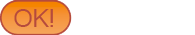
<style>
.page{position:relative;width:195px;height:35px;background:#ffffff}
.page>*{position:absolute;margin:0}
.t1{font:40.6px "Kartika";letter-spacing:-0.025em;color:#b64b3c}
</style>
<div class="page">
<p class="t1" style="left:14px;top:9px;width:39px;height:18px">OK!</p>
</div>
